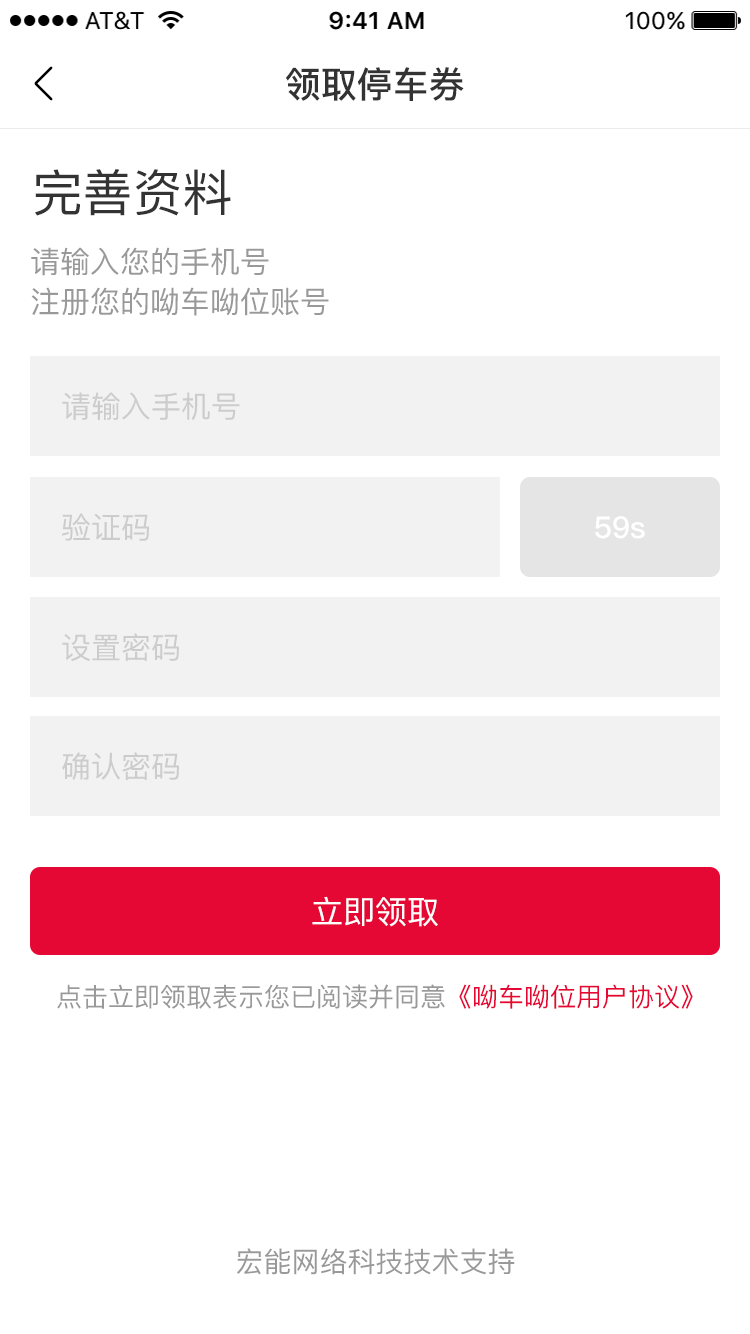
<style>
.page{position:relative;width:750px;height:1334px;background:#ffffff}
.page>*{position:absolute;margin:0}
.t1{font:36px "PingFang-SC-Bold";color:#333333}
.t2{font:50px "PingFang-SC-Medium";color:#333333}
.t3{font:30px/40px "PingFang-SC-Medium";color:#999999}
.t4{font:30px "PingFang-SC-Medium";color:#cccccc}
.t5{font:30px "PingFang-SC-Bold";color:#ffffff}
.t6{font:32px "PingFang-SC-Medium";color:#ffffff}
.t7{font:26px "PingFang-SC-Medium";color:#999999}
.t8{font:26px "PingFang-SC-Medium";color:#e50834}
.t9{font:28px "PingFang-SC-Medium";color:#999999}
</style>
<div class="page">
<p class="t1" style="left:285px;top:67px;width:179px;height:34px">领取停车券</p>
<p class="t2" style="left:35px;top:169px;width:196px;height:47px">完善资料</p>
<p class="t3" style="left:31px;top:247px;width:298px;height:69px">请输入您的手机号<br>注册您的呦车呦位账号</p>
<p class="t4" style="left:62px;top:392px;width:178px;height:28px">请输入手机号</p>
<p class="t4" style="left:62px;top:513px;width:87px;height:28px">验证码</p>
<p class="t5" style="left:595px;top:516px;width:50px;height:23px">59s</p>
<p class="t4" style="left:62px;top:633px;width:117px;height:28px">设置密码</p>
<p class="t4" style="left:62px;top:752px;width:117px;height:28px">确认密码</p>
<p class="t6" style="left:312px;top:896px;width:126px;height:31px">立即领取</p>
<p class="t7" style="left:57px;top:984px;width:636px;height:25px">点击立即领取表示您已阅读并同意<span class="t8">《呦车呦位用户协议》</span></p>
<p class="t9" style="left:237px;top:1248px;width:278px;height:27px">宏能网络科技技术支持</p>
</div>
